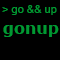
<style>
.page{position:relative;width:60px;height:60px;background:#000000}
.page>*{position:absolute;margin:0}
.t1{font:11px "ArialMT";color:#009933}
.t2{font:16px "Verdana-Bold";color:#009933}
</style>
<div class="page">
<p class="t1" style="left:2px;top:5px;width:55px;height:10px">&gt; go &amp;&amp; up</p>
<p class="t2" style="left:3px;top:25px;width:56px;height:12px">gonup</p>
</div>
